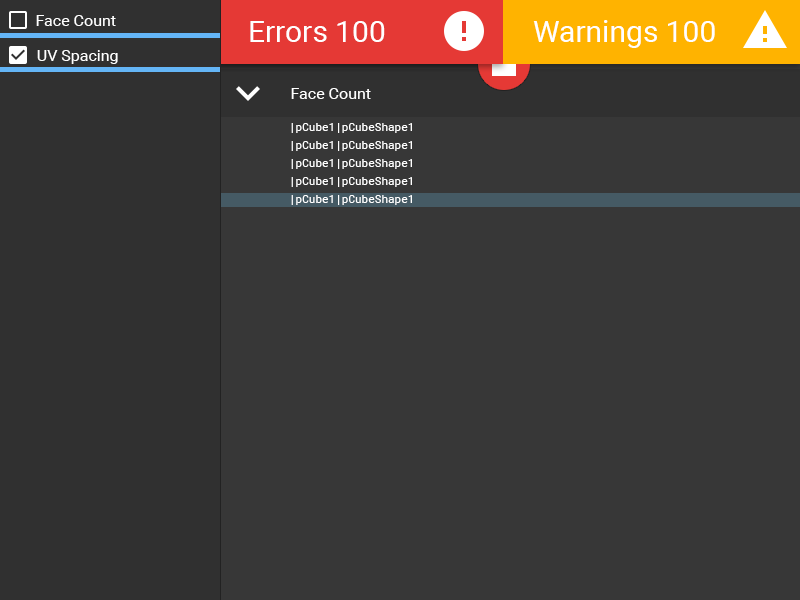
<style>
.page{position:relative;width:800px;height:600px;background:#373737}
.page>*{position:absolute;margin:0}
.t1{font:16px "Roboto-Regular";color:#ffffff}
.t2{font:30px "Roboto-Regular";color:#ffffff}
.t3{font:11px "RobotoMono-Regular";color:#ffffff}
</style>
<div class="page">
<p class="t1" style="left:36px;top:15px;width:80px;height:11px">Face Count</p>
<p class="t2" style="left:250px;top:21px;width:135px;height:21px">Errors 100</p>
<p class="t2" style="left:533px;top:20px;width:182px;height:28px">Warnings 100</p>
<p class="t1" style="left:37px;top:50px;width:81px;height:14px">UV Spacing</p>
<p class="t1" style="left:291px;top:88px;width:80px;height:11px">Face Count</p>
<p class="t3" style="left:291px;top:123px;width:121px;height:10px">|pCube1|pCubeShape1</p>
<p class="t3" style="left:291px;top:141px;width:121px;height:10px">|pCube1|pCubeShape1</p>
<p class="t3" style="left:291px;top:159px;width:121px;height:10px">|pCube1|pCubeShape1</p>
<p class="t3" style="left:291px;top:177px;width:121px;height:10px">|pCube1|pCubeShape1</p>
<p class="t3" style="left:291px;top:195px;width:121px;height:10px">|pCube1|pCubeShape1</p>
</div>
